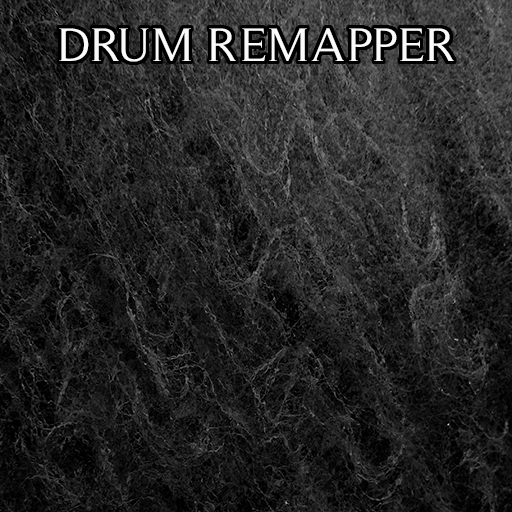
<style>
.page{position:relative;width:512px;height:512px}
.page>*{position:absolute;margin:0}
.t1{font:48px "Timeless-Normal";color:#fafafa}
</style>
<div class="page">
<p class="t1" style="left:59px;top:28px;width:395px;height:34px">DRUM REMAPPER</p>
</div>
